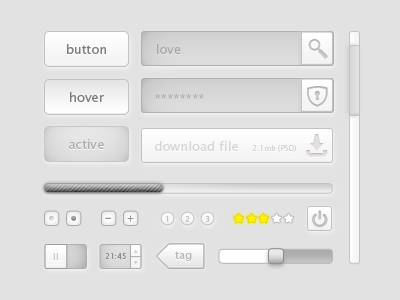
<style>
.page{position:relative;width:400px;height:300px;background:#e2e2e2}
.page>*{position:absolute;margin:0}
.t1{font:14px "LucidaSansEF-Roman";color:#7c7c7c}
.t2{font:14px "LucidaSansEF-Roman";color:#a7a7a7}
.t3{font:14px "LucidaSansEF-Roman"}
.t4{font:14px "LucidaSansEF-Roman";color:#adadad}
.t5{font:14px "LucidaSansEF-Roman";color:#d5d5d5}
.t6{font:8px "LucidaSansEF-Roman";color:#d5d5d5}
.t7{font:14px "LucidaSansEF-Roman";color:#888888}
.t8{font:12px "LucidaSansEF-Roman";color:#888888}
.t9{font:8px "LucidaSansEF-Roman";color:#c3c2c2}
.t10{font:10px "LucidaSansEF-Roman";color:#cdcbcb}
.t11{font:8px "LucidaSansEF-Roman";color:#8e8e8e}
.t12{font:12px "LucidaSansEF-Roman";color:#b8b8b8}
</style>
<div class="page">
<p class="t1" style="left:67px;top:44px;width:39px;height:10px">button</p>
<p class="t2" style="left:157px;top:44px;width:24px;height:10px">love</p>
<p class="t1" style="left:70px;top:92px;width:34px;height:10px">hover</p>
<p class="t3" style="left:155px;top:94px;width:49px;height:5px">********</p>
<p class="t4" style="left:69px;top:139px;width:35px;height:10px">active</p>
<p class="t5" style="left:155px;top:141px;width:83px;height:10px">download file</p>
<p class="t6" style="left:252px;top:145px;width:45px;height:7px">2.1mb (PSD)</p>
<p class="t7" style="left:105px;top:217px;width:6px;height:2px">_</p>
<p class="t8" style="left:127px;top:215px;width:7px;height:7px">+</p>
<p class="t9" style="left:166px;top:216px;width:3px;height:6px">1</p>
<p class="t9" style="left:185px;top:216px;width:5px;height:6px">2</p>
<p class="t9" style="left:206px;top:216px;width:4px;height:6px">3</p>
<p class="t10" style="left:53px;top:253px;width:5px;height:7px">II</p>
<p class="t11" style="left:105px;top:253px;width:21px;height:7px">21:45</p>
<p class="t12" style="left:175px;top:251px;width:17px;height:10px">tag</p>
</div>
